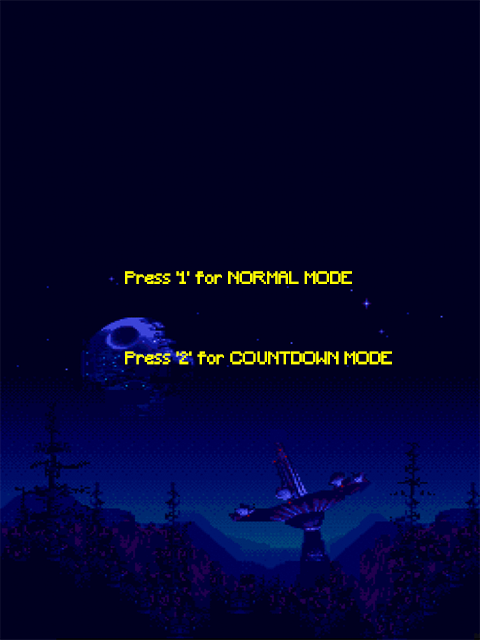
<style>
.page{position:relative;width:480px;height:640px;background:#000020}
.page>*{position:absolute;margin:0}
.t1{font:16.7px "Minecraft";letter-spacing:0.005em;color:#ffff00}
</style>
<div class="page">
<p class="t1" style="left:125px;top:271px;width:267px;height:94px">Press '1' for NORMAL MODE<br><br><br><br>Press '2' for COUNTDOWN MODE</p>
</div>
